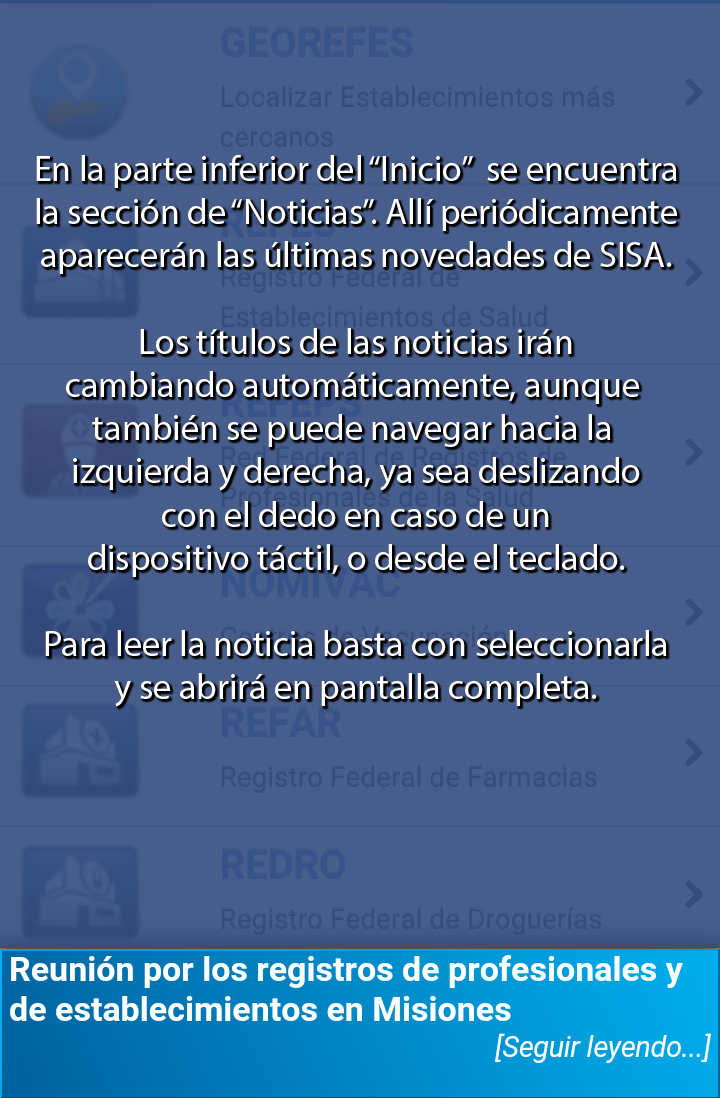
<style>
.page{position:relative;width:720px;height:1098px;background:#475e8c}
.page>*{position:absolute;margin:0}
.t1{font:36px "MyriadPro-Regular";color:#ffffff}
</style>
<div class="page">
<p class="t1" style="left:36px;top:155px;width:641px;height:552px;text-align:center">En la parte inferior del “Inicio”  se encuentra<br>la sección de “Noticias”. Allí periódicamente<br>aparecerán las últimas novedades de SISA.<br><br>Los títulos de las noticias irán<br>cambiando automáticamente, aunque <br>también se puede navegar hacia la <br>izquierda y derecha, ya sea deslizando<br>con el dedo en caso de un<br>dispositivo táctil, o desde el teclado.<br><br>Para leer la noticia basta con seleccionarla<br>y se abrirá en pantalla completa.</p>
</div>
